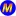
<style>
.page{position:relative;width:16px;height:16px;background:#0600ff}
.page>*{position:absolute;margin:0}
.t1{font:12px "Arial-BoldItalicMT"}
</style>
<div class="page">
<p class="t1" style="left:2px;top:3px;width:11px;height:10px">M</p>
</div>
